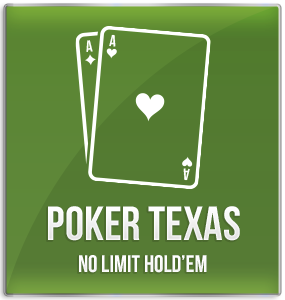
<style>
.page{position:relative;width:285px;height:300px}
.page>*{position:absolute;margin:0}
.t1{font:48px "BebasNeueBold";color:#ffffff;text-transform:uppercase}
.t2{font:24px "BebasNeueBold";color:#ffffff}
</style>
<div class="page">
<p class="t1" style="left:48px;top:206px;width:192px;height:35px">poker texas</p>
<p class="t2" style="left:79px;top:255px;width:128px;height:18px">no limit hold’em</p>
</div>
